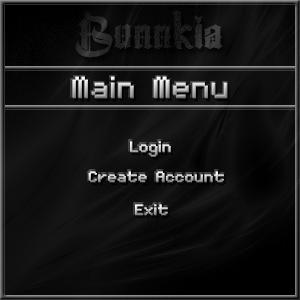
<style>
.page{position:relative;width:300px;height:300px}
.page>*{position:absolute;margin:0}
.t1{font:48px "TheCenturion";color:#202020;font-weight:bold}
.t2{font:48px "MinimalFont5x7";font-weight:bold}
.t3{font:24px "MinimalFont5x7";font-weight:bold}
</style>
<div class="page">
<p class="t1" style="left:75px;top:10px;width:148px;height:49px">Bunnkia</p>
<p class="t2" style="left:72px;top:76px;width:156px;height:23px">Main Menu</p>
<p class="t3" style="left:130px;top:141px;width:41px;height:16px">Login</p>
<p class="t3" style="left:88px;top:171px;width:136px;height:12px">Create Account</p>
<p class="t3" style="left:135px;top:204px;width:33px;height:12px">Exit</p>
</div>
